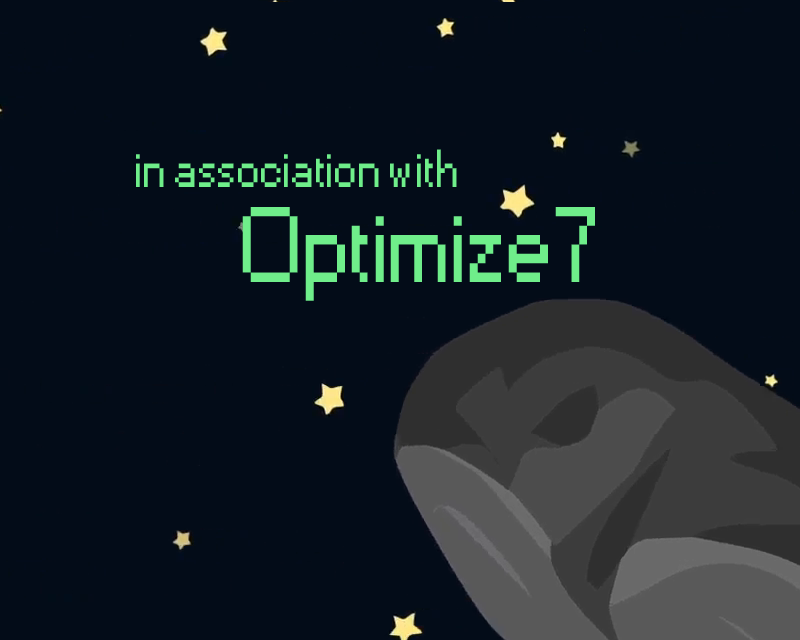
<style>
.page{position:relative;width:800px;height:640px;background:#030c18}
.page>*{position:absolute;margin:0}
.t1{font:50px "Small Fonts";color:#6fee8a}
.t2{font:100px "Small Fonts";color:#6fee8a}
</style>
<div class="page">
<p class="t1" style="left:136px;top:149px;width:321px;height:38px">in association with</p>
<p class="t2" style="left:242px;top:207px;width:353px;height:94px">Optimize7</p>
</div>
